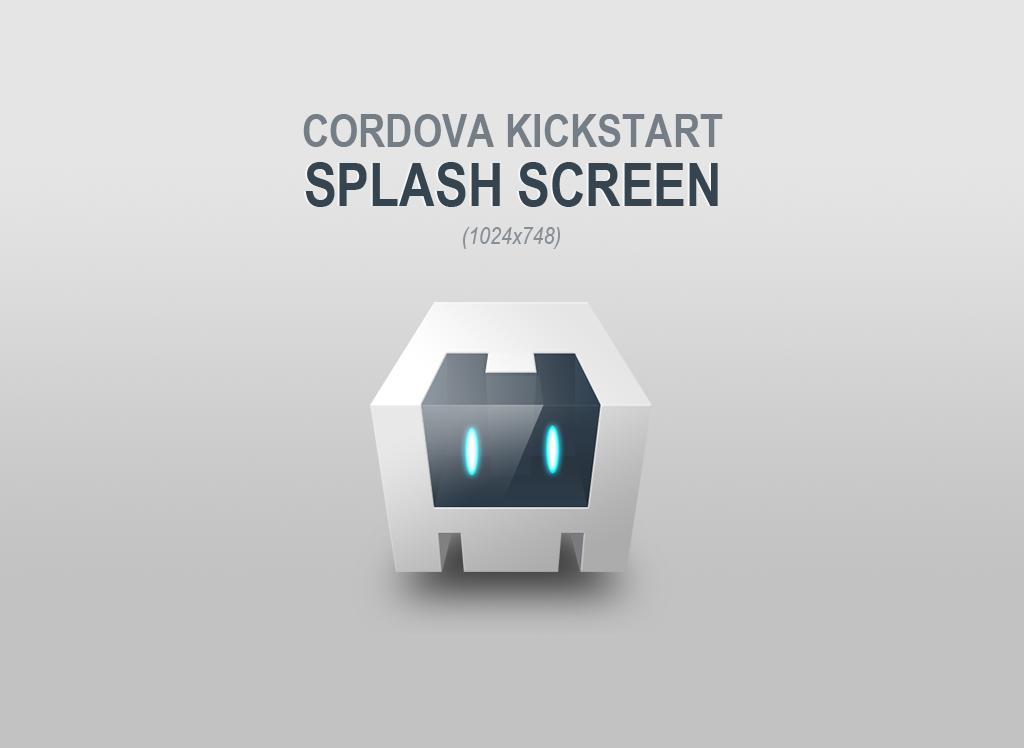
<style>
.page{position:relative;width:1024px;height:748px;background:#e5e5e5}
.page>*{position:absolute;margin:0}
.t1{font:46px "ArialNarrow-Bold";color:#757e86;text-transform:uppercase}
.t2{font:60px "ArialNarrow-Bold";color:#364450;text-transform:uppercase}
.t3{font:24px "ArialNarrow-Italic";color:#868e96}
</style>
<div class="page">
<p class="t1" style="left:303px;top:114px;width:420px;height:33px">Cordova Kickstart</p>
<p class="t2" style="left:305px;top:162px;width:413px;height:45px">Splash Screen</p>
<p class="t3" style="left:463px;top:227px;width:97px;height:22px">(1024x748)</p>
</div>
